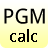
<style>
.page{position:relative;width:48px;height:48px}
.page>*{position:absolute;margin:0}
.t1{font:20.8px "DroidSans";color:#000000}
.t2{font:16.7px "DroidSans";color:#000000}
</style>
<div class="page">
<p class="t1" style="left:4px;top:8px;width:41px;height:16px">PGM</p>
<p class="t2" style="left:10px;top:29px;width:27px;height:13px">calc</p>
</div>
